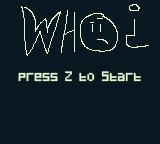
<style>
.page{position:relative;width:160px;height:144px;background:#071821}
.page>*{position:absolute;margin:0}
.t1{font:8px "Pixeled";color:#e0f8cf}
.t2{font:18px "Pixeled";color:#86c06c}
</style>
<div class="page">
<p class="t1" style="left:18px;top:71px;width:123px;height:11px"><span class="t2"> </span>press  Z  to  Start</p>
</div>
